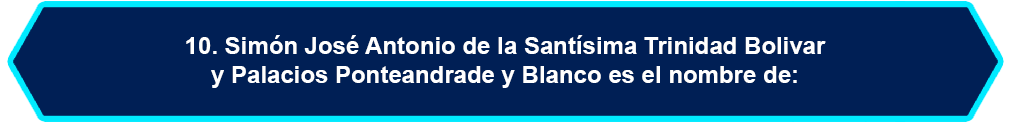
<style>
.page{position:relative;width:1009px;height:122px;background:#001f55}
.page>*{position:absolute;margin:0}
.t1{font:24px "Arial-BoldMT";color:#ffffff}
</style>
<div class="page">
<p class="t1" style="left:186px;top:35px;width:640px;height:53px;text-align:center">10. Simón José Antonio de la Santísima Trinidad Bolivar<br>y Palacios Ponteandrade y Blanco es el nombre de:</p>
</div>
